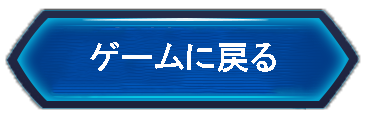
<style>
.page{position:relative;width:365px;height:121px;background:#ffffff}
.page>*{position:absolute;margin:0}
.t1{font:33.3px "HGPGothicE";color:#ffffff}
</style>
<div class="page">
<p class="t1" style="left:90px;top:42px;width:186px;height:30px">ゲームに戻る</p>
</div>
